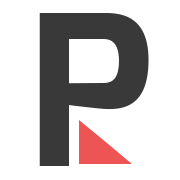
<style>
.page{position:relative;width:180px;height:180px;background:#ffffff}
.page>*{position:absolute;margin:0}
.t1{font:209.7px "Exo-Bold";letter-spacing:-0.01em;color:#393939;text-transform:uppercase}
</style>
<div class="page">
<p class="t1" style="left:39px;top:13px;width:110px;height:153px">P</p>
</div>
